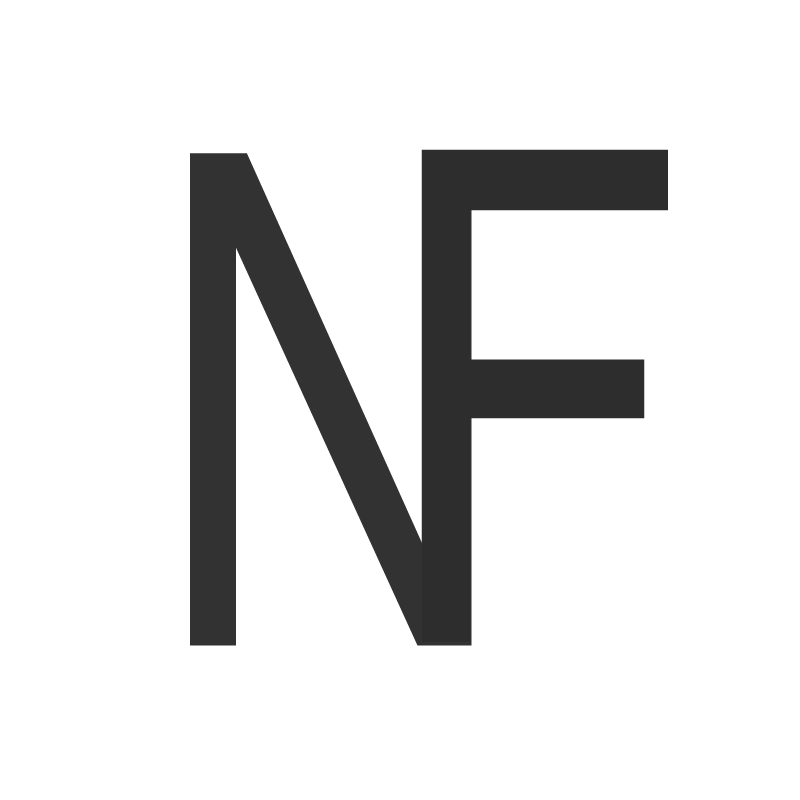
<style>
.page{position:relative;width:800px;height:800px;background:#ffffff}
.page>*{position:absolute;margin:0}
.t1{font:686.1px "Helvetica";color:#2d2d2d;scale:0.72 1}
.t2{font:686.1px "Helvetica";color:#323232;scale:0.72 1}
</style>
<div class="page">
<p class="t1" style="left:421px;top:149px;width:247px;height:493px">F</p>
<p class="t2" style="left:190px;top:153px;width:282px;height:493px">N</p>
</div>
